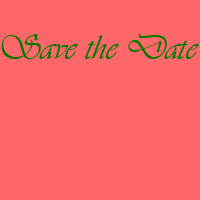
<style>
.page{position:relative;width:200px;height:200px;background:#ff676a}
.page>*{position:absolute;margin:0}
.t1{font:36px "Vivaldii";color:#007b00}
</style>
<div class="page">
<p class="t1" style="left:1px;top:33px;width:198px;height:26px">Save the Date</p>
</div>
